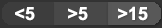
<style>
.page{position:relative;width:162px;height:28px;background:#484848}
.page>*{position:absolute;margin:0}
.t1{font:18px "Arial-BoldMT";color:#ffffff}
</style>
<div class="page">
<p class="t1" style="left:118px;top:6px;width:30px;height:15px">&gt;15</p>
<p class="t1" style="left:15px;top:7px;width:20px;height:14px">&lt;5</p>
<p class="t1" style="left:68px;top:7px;width:20px;height:14px">&gt;5</p>
</div>
